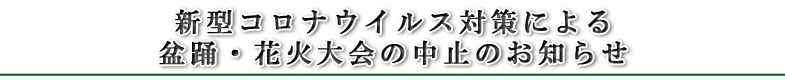
<style>
.page{position:relative;width:785px;height:80px;background:#ffffff}
.page>*{position:absolute;margin:0}
.t1{font:26.2px "HGMinchoB";letter-spacing:0.18em;font-weight:bold}
</style>
<div class="page">
<p class="t1" style="left:159px;top:9px;width:468px;height:57px;text-align:center">新型コロナウイルス対策による<br>盆踊・花火大会の中止のお知らせ</p>
</div>
